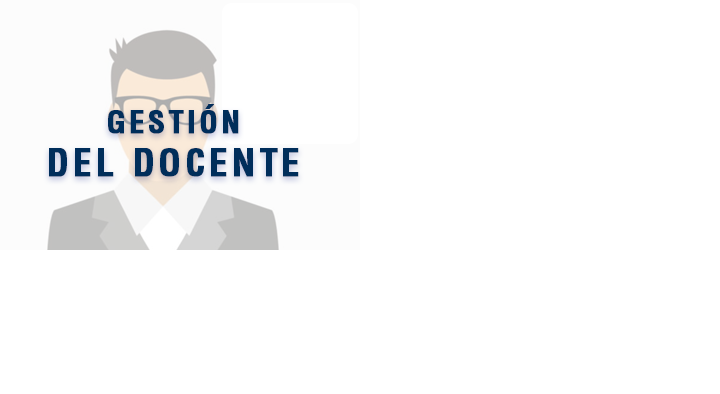
<style>
.page{position:relative;width:720px;height:394px;background:#ffffff}
.page>*{position:absolute;margin:0}
.t1{font:36px "Helvetica-Condensed-Bold";letter-spacing:0.1em;color:#002e5b;font-weight:bold}
.t2{font:30px "Helvetica-Condensed-Bold";letter-spacing:0.1em;color:#002e5b;font-weight:bold}
</style>
<div class="page">
<p class="t1" style="left:49px;top:104px;width:250px;height:73px;text-align:center"><span class="t2">GESTIÓN<br></span>DEL DOCENTE</p>
</div>
